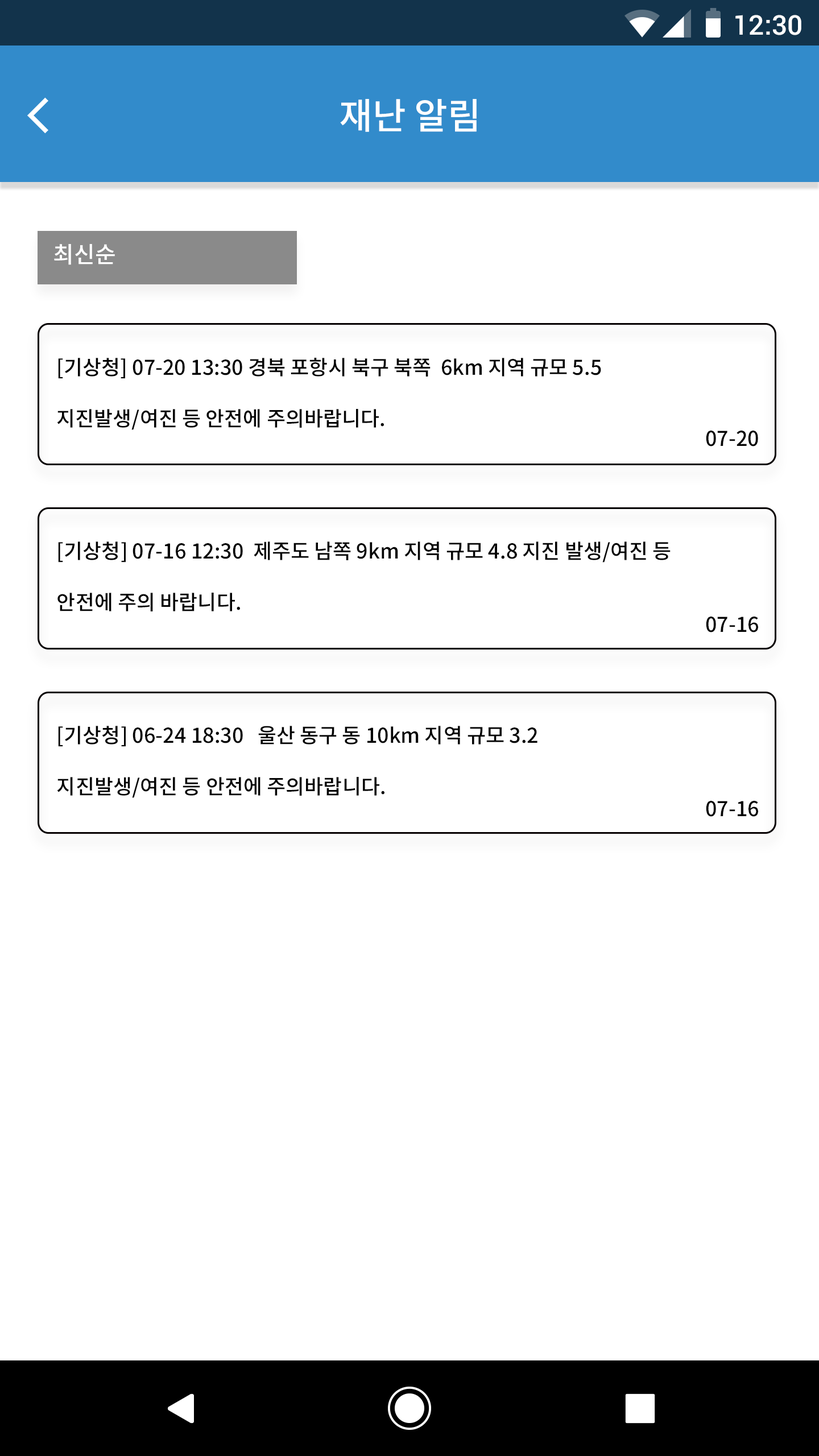
<style>
.page{position:relative;width:819px;height:1456px;background:#ffffff}
.page>*{position:absolute;margin:0}
.t1{font:27.3px "Roboto-Medium";color:#ffffff}
.t2{font:36.4px "NotoSansCJKkr-Medium";color:#ffffff}
.t3{font:22.7px "NotoSansCJKkr-Medium";color:#ffffff}
.t4{font:20.5px/51.2px "NotoSansCJKkr-Medium";color:#030303}
.t5{font:20.5px "NotoSansCJKkr-Medium";color:#030303}
</style>
<div class="page">
<p class="t1" style="left:735px;top:15px;width:66px;height:20px">12:30</p>
<p class="t2" style="left:340px;top:99px;width:137px;height:33px">재난 알림</p>
<p class="t3" style="left:54px;top:244px;width:61px;height:21px">최신순</p>
<p class="t4" style="left:57px;top:358px;width:544px;height:72px">[기상청] 07-20 13:30 경북 포항시 북구 북쪽  6km 지역 규모 5.5 <br>지진발생/여진 등 안전에 주의바랍니다.</p>
<p class="t5" style="left:706px;top:431px;width:52px;height:15px">07-20</p>
<p class="t4" style="left:57px;top:541px;width:614px;height:70px">[기상청] 07-16 12:30  제주도 남쪽 9km 지역 규모 4.8 지진 발생/여진 등<br>안전에 주의 바랍니다.</p>
<p class="t5" style="left:706px;top:617px;width:52px;height:15px">07-16</p>
<p class="t4" style="left:57px;top:726px;width:480px;height:72px">[기상청] 06-24 18:30   울산 동구 동 10km 지역 규모 3.2 <br>지진발생/여진 등 안전에 주의바랍니다.</p>
<p class="t5" style="left:706px;top:801px;width:52px;height:16px">07-16</p>
</div>
